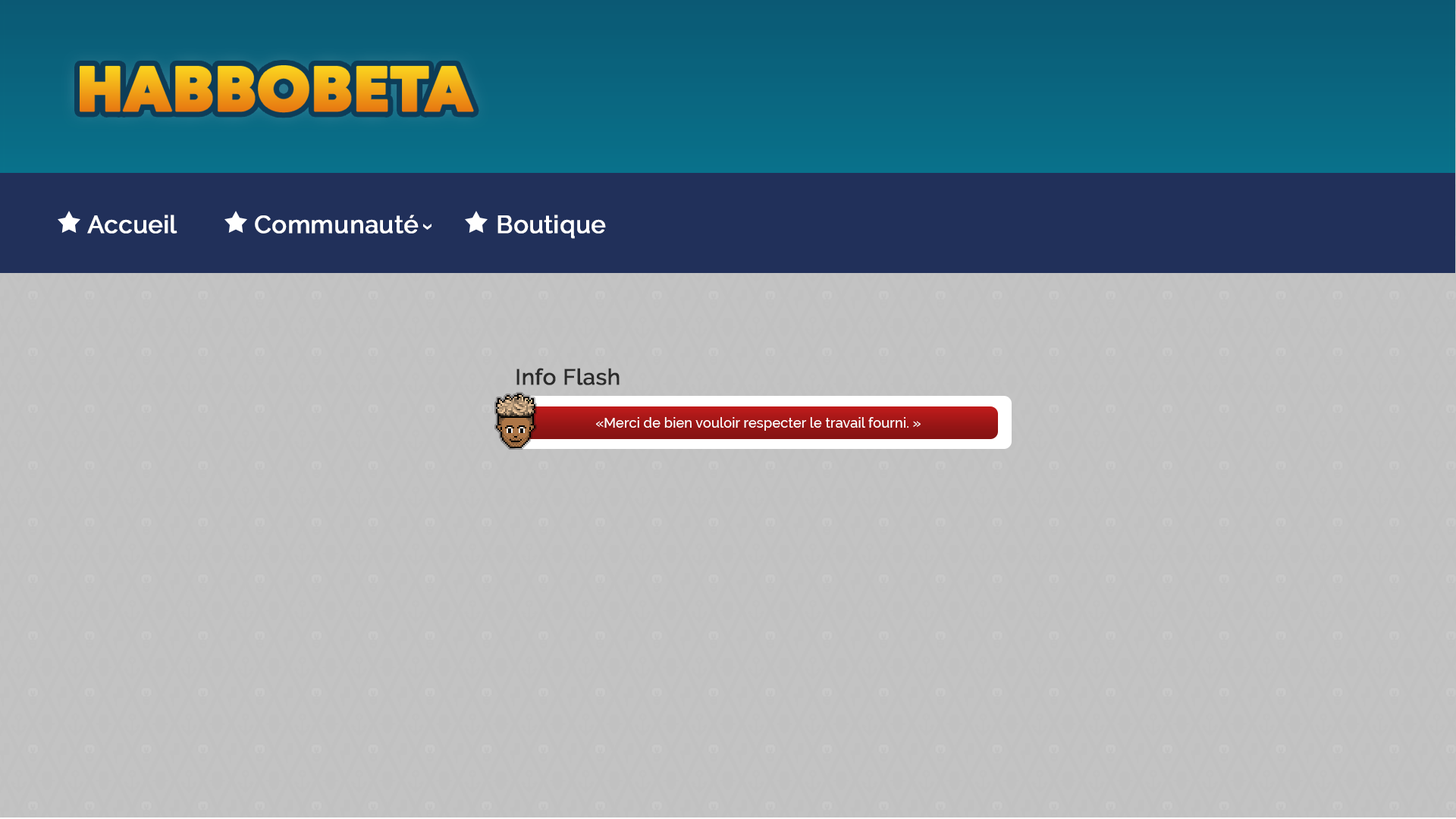
<style>
.page{position:relative;width:1456px;height:819px;background:#c3c3c3}
.page>*{position:absolute;margin:0}
.t1{font:24.5px "Raleway-Medium";color:#ffffff;font-weight:bold}
.t2{font:22px "Raleway-Medium";color:#2b2b2b;font-weight:bold}
.t3{font:14px "Raleway-Medium";color:#ffffff}
</style>
<div class="page">
<p class="t1" style="left:87px;top:215px;width:90px;height:19px">Accueil</p>
<p class="t1" style="left:255px;top:215px;width:164px;height:19px">Communauté</p>
<p class="t1" style="left:497px;top:215px;width:109px;height:24px">Boutique</p>
<p class="t2" style="left:516px;top:368px;width:104px;height:17px">Info Flash</p>
<p class="t3" style="left:596px;top:417px;width:325px;height:14px">«Merci de bien vouloir respecter le travail fourni. »</p>
</div>
